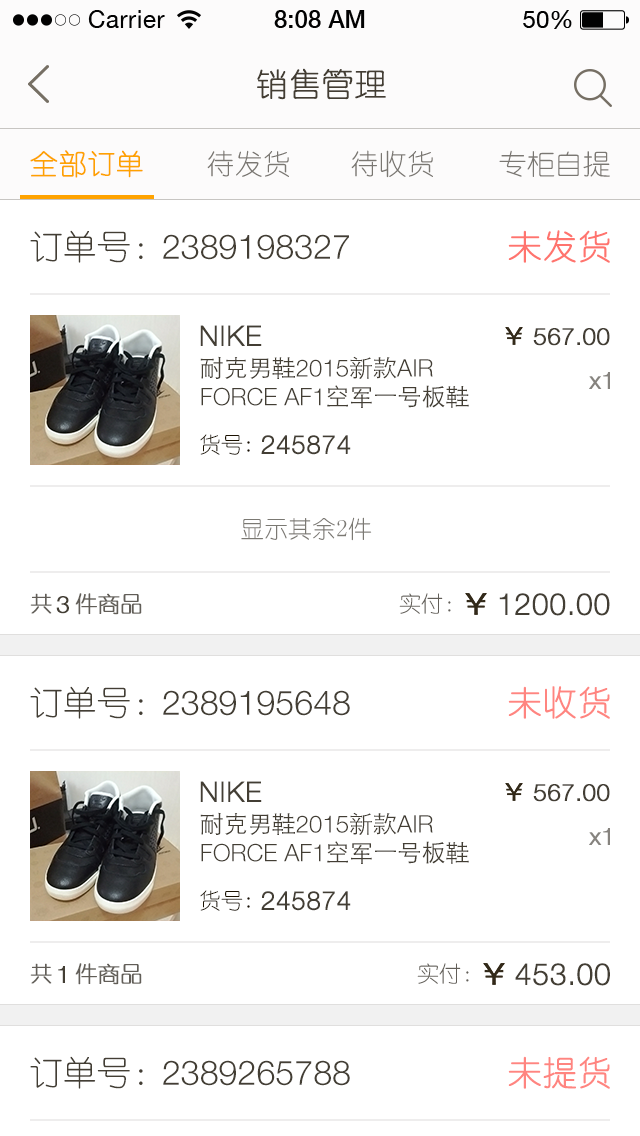
<style>
.page{position:relative;width:640px;height:1136px;background:#ffffff}
.page>*{position:absolute;margin:0}
.t1{font:32px "YouYuan";color:#433d33;text-transform:uppercase;font-weight:bold}
.t2{font:28px "YouYuan";color:#fea200;text-transform:uppercase;font-weight:bold}
.t3{font:28px "YouYuan";color:#7a7772;text-transform:uppercase}
.t4{font:34px "YouYuan";color:#433e34;text-transform:uppercase}
.t5{font:34px "YouYuan";color:#ff5f57;text-transform:uppercase;font-weight:bold}
.t6{font:34px "HelveticaNeueLTPro-Lt";color:#433e34;text-transform:uppercase}
.t7{font:28px "HelveticaNeueLTPro-Lt";color:#433e34;text-transform:uppercase;font-weight:bold}
.t8{font:24px "HelveticaNeueLTPro-Lt";color:#433e34;text-transform:uppercase;font-weight:bold}
.t9{font:24px "HelveticaNeueLTPro-Lt";color:#433e34;text-transform:uppercase}
.t10{font:24px "STHeitiSC-Light";color:#433e34;text-transform:uppercase}
.t11{font:24px "HelveticaNeueLTPro-Lt";color:#86837e;font-weight:bold}
.t12{font:22px "YouYuan";color:#1b1100;text-transform:uppercase}
.t13{font:26px "HelveticaNeueLTPro-Lt";color:#433e34;text-transform:uppercase;font-weight:bold}
.t14{font:24px "YouYuan";color:#7b7973;text-transform:uppercase}
.t15{font:22px "YouYuan";color:#625e58;text-transform:uppercase;font-weight:bold}
.t16{font:22px "YouYuan";color:#625e58;text-transform:uppercase}
.t17{font:30px "HelveticaNeueLTPro-Lt";color:#433e34;text-transform:uppercase;font-weight:bold}
.t18{font:34px "YouYuan";color:#ff746e;text-transform:uppercase;font-weight:bold}
</style>
<div class="page">
<p class="t1" style="left:257px;top:68px;width:129px;height:32px">销售管理</p>
<p class="t2" style="left:30px;top:150px;width:113px;height:28px">全部订单</p>
<p class="t3" style="left:207px;top:150px;width:82px;height:27px">待发货</p>
<p class="t3" style="left:351px;top:150px;width:82px;height:28px">待收货</p>
<p class="t3" style="left:499px;top:150px;width:111px;height:27px">专柜自提</p>
<p class="t4" style="left:30px;top:230px;width:113px;height:33px">订单号：</p>
<p class="t5" style="left:508px;top:230px;width:102px;height:33px;opacity:0.9">未发货</p>
<p class="t6" style="left:163px;top:234px;width:186px;height:26px">2389198327</p>
<p class="t7" style="left:200px;top:325px;width:62px;height:21px">NIKE</p>
<p class="t8" style="left:533px;top:328px;width:77px;height:18px">567.00</p>
<p class="t9" style="left:200px;top:356px;width:269px;height:52px"><span class="t10">耐克男鞋</span>2015<span class="t10">新款</span>air force AF1<span class="t10">空军一号板鞋</span></p>
<p class="t11" style="left:589px;top:372px;width:21px;height:17px">x1</p>
<p class="t12" style="left:200px;top:434px;width:50px;height:21px">货号:</p>
<p class="t13" style="left:261px;top:435px;width:90px;height:20px">245874</p>
<p class="t14" style="left:241px;top:517px;width:131px;height:24px">显示其余2件</p>
<p class="t15" style="left:30px;top:593px;width:22px;height:21px">共</p>
<p class="t15" style="left:75px;top:593px;width:67px;height:22px">件商品</p>
<p class="t16" style="left:399px;top:593px;width:52px;height:21px">实付：</p>
<p class="t17" style="left:499px;top:593px;width:111px;height:23px">1200.00</p>
<p class="t8" style="left:56px;top:596px;width:13px;height:18px">3</p>
<p class="t4" style="left:30px;top:686px;width:113px;height:33px">订单号：</p>
<p class="t18" style="left:508px;top:686px;width:102px;height:33px;opacity:0.9">未收货</p>
<p class="t6" style="left:163px;top:690px;width:187px;height:26px">2389195648</p>
<p class="t7" style="left:200px;top:781px;width:62px;height:21px">NIKE</p>
<p class="t8" style="left:533px;top:784px;width:77px;height:18px">567.00</p>
<p class="t9" style="left:200px;top:812px;width:269px;height:52px"><span class="t10">耐克男鞋</span>2015<span class="t10">新款</span>air force AF1<span class="t10">空军一号板鞋</span></p>
<p class="t11" style="left:589px;top:828px;width:21px;height:17px">x1</p>
<p class="t12" style="left:200px;top:890px;width:50px;height:21px">货号:</p>
<p class="t13" style="left:261px;top:891px;width:90px;height:20px">245874</p>
<p class="t15" style="left:30px;top:963px;width:22px;height:21px">共</p>
<p class="t8" style="left:58px;top:966px;width:7px;height:17px">1</p>
<p class="t15" style="left:75px;top:963px;width:67px;height:22px">件商品</p>
<p class="t16" style="left:417px;top:963px;width:52px;height:21px">实付：</p>
<p class="t17" style="left:515px;top:963px;width:95px;height:23px">453.00</p>
<p class="t4" style="left:30px;top:1056px;width:113px;height:33px">订单号：</p>
<p class="t6" style="left:163px;top:1060px;width:187px;height:26px">2389265788</p>
<p class="t18" style="left:508px;top:1056px;width:102px;height:33px;opacity:0.9">未提货</p>
</div>
